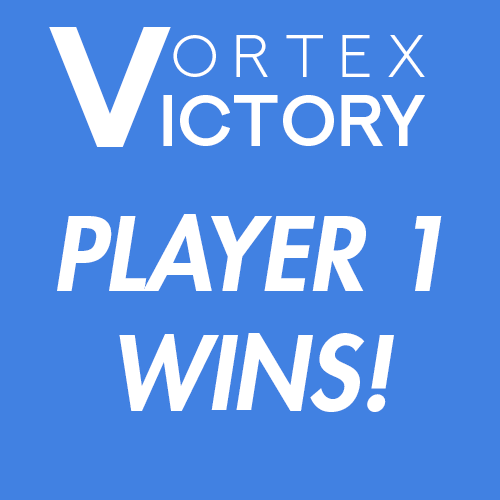
<style>
.page{position:relative;width:500px;height:500px;background:#4181e2}
.page>*{position:absolute;margin:0}
.t1{font:169.2px "NEXTART-Bold";color:#ffffff}
.t2{font:60.2px "NEXTART-Light";color:#ffffff}
.t3{font:72px "NEXTART-SemiBold";color:#ffffff}
.t4{font:99.1px "FuturaStd-HeavyOblique";color:#ffffff}
</style>
<div class="page">
<p class="t1" style="left:49px;top:27px;width:122px;height:120px">V</p>
<p class="t2" style="left:173px;top:35px;width:252px;height:42px">O R T E X</p>
<p class="t3" style="left:163px;top:95px;width:262px;height:51px">ictory</p>
<p class="t4" style="left:57px;top:214px;width:385px;height:198px;text-align:center">PLAYER 1<br>WINS!</p>
</div>
